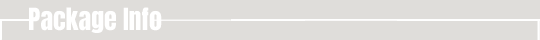
<style>
.page{position:relative;width:540px;height:40px;background:#dfddda}
.page>*{position:absolute;margin:0}
.t1{font:26px "Anton-Regular";color:#ffffff}
</style>
<div class="page">
<p class="t1" style="left:29px;top:7px;width:133px;height:26px">Package Info</p>
</div>
